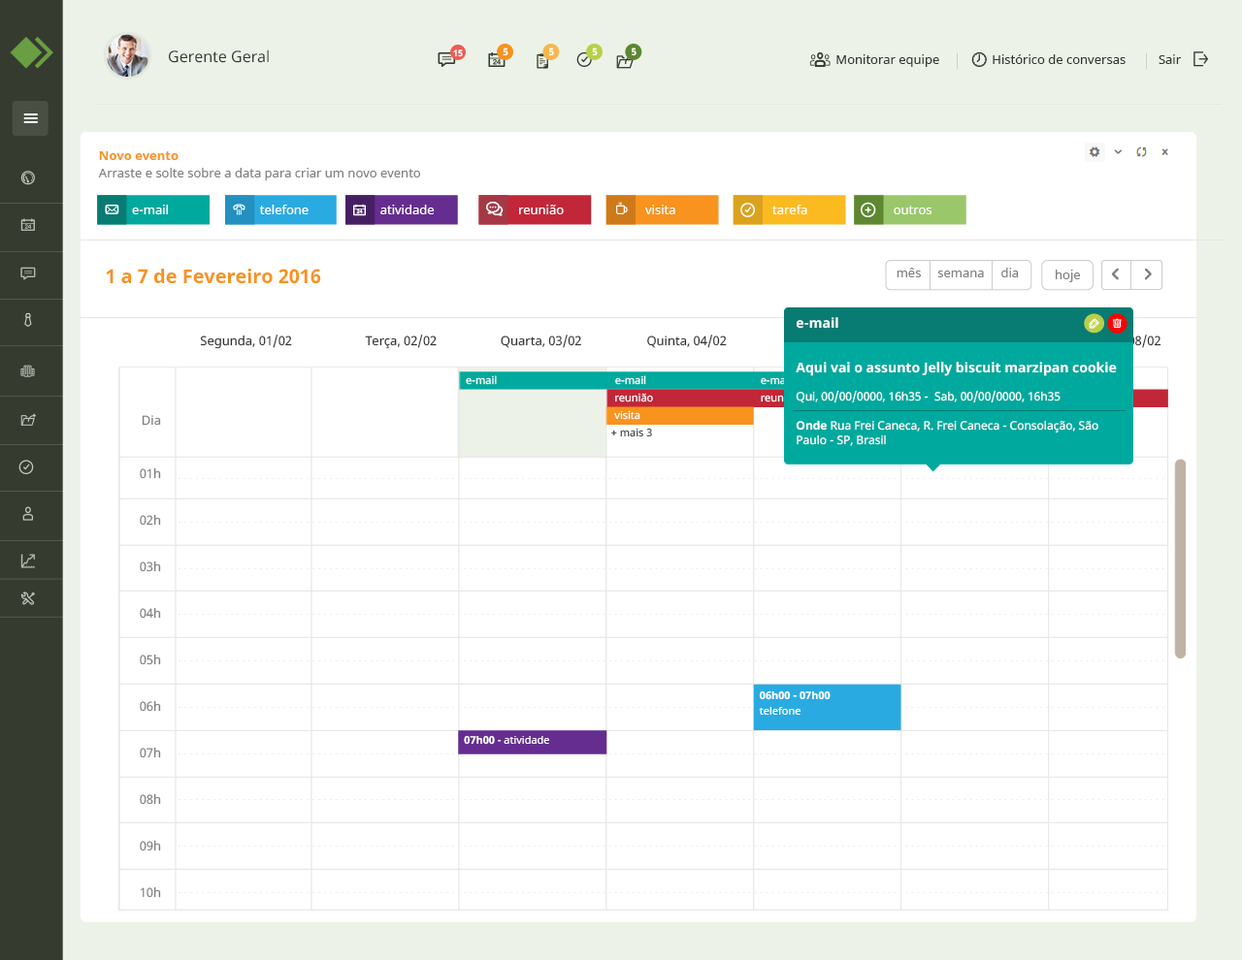
<style>
.page{position:relative;width:1242px;height:960px;background:#ffffff}
.page>*{position:absolute;margin:0}
.t1{font:15.5px "NotoSans";color:#353b2f}
.t2{font:8.7px "NotoSans-Bold";color:#ffffff}
.t3{font:9.7px "NotoSans-Bold";color:#ffffff}
.t4{font:12.6px "NotoSans";color:#353b2f}
.t5{font:12.6px "NotoSans-Bold";color:#f7931e}
.t6{font:12.6px "NotoSans";color:#808080}
.t7{font:12.6px "NotoSans";color:#ffffff}
.t8{font:19.4px "NotoSans-Bold";color:#f7931e}
.t9{font:11.6px/29.1px "NotoSans";color:#ffffff}
.t10{font:13.6px "NotoSans-Bold";color:#ffffff}
.t11{font:13.6px/29.1px "NotoSans-Bold";color:#ffffff}
.t12{font:11.6px "NotoSans";color:#ffffff}
.t13{font:11.6px/29.1px "NotoSans-Bold";color:#ffffff}
.t14{font:12.6px "NotoSans";color:#333333}
.t15{font:12.6px "NotoSans"}
.t16{font:10.7px "NotoSans";color:#ffffff}
.t17{font:10.7px "NotoSans";color:#00a99d}
.t18{font:12.6px/46.6px "NotoSans";color:#808080}
.t19{font:12.6px/53.4px "NotoSans";color:#808080}
.t20{font:10.7px "NotoSans"}
.t21{font:10.7px/15.5px "NotoSans-Bold";color:#ffffff}
.t22{font:10.7px/15.5px "NotoSans";color:#ffffff}
.t23{font:10.7px "NotoSans-Bold";color:#ffffff}
</style>
<div class="page">
<p class="t1" style="left:169px;top:49px;width:100px;height:14px">Gerente Geral</p>
<p class="t2" style="left:453px;top:49px;width:10px;height:8px">15</p>
<p class="t3" style="left:502px;top:48px;width:6px;height:8px">5</p>
<p class="t3" style="left:549px;top:48px;width:5px;height:8px">5</p>
<p class="t3" style="left:592px;top:48px;width:6px;height:8px">5</p>
<p class="t3" style="left:632px;top:48px;width:4px;height:8px">5</p>
<p class="t4" style="left:836px;top:54px;width:345px;height:13px">Monitorar equipe                Histórico de conversas          Sair</p>
<p class="t5" style="left:99px;top:151px;width:79px;height:9px">Novo evento</p>
<p class="t6" style="left:98px;top:168px;width:322px;height:12px">Arraste e solte sobre a data para criar um novo evento</p>
<p class="t7" style="left:132px;top:205px;width:36px;height:9px">e-mail</p>
<p class="t7" style="left:259px;top:205px;width:49px;height:9px">telefone</p>
<p class="t7" style="left:380px;top:205px;width:54px;height:9px">atividade</p>
<p class="t7" style="left:519px;top:205px;width:45px;height:9px">reunião</p>
<p class="t7" style="left:645px;top:205px;width:30px;height:9px">visita</p>
<p class="t7" style="left:772px;top:205px;width:35px;height:9px">tarefa</p>
<p class="t7" style="left:893px;top:206px;width:38px;height:8px">outros</p>
<p class="t8" style="left:106px;top:269px;width:215px;height:15px">1 a 7 de Fevereiro 2016</p>
<p class="t6" style="left:896px;top:268px;width:123px;height:9px">mês     semana     dia</p>
<p class="t6" style="left:1055px;top:270px;width:25px;height:12px">hoje</p>
<p class="t9" style="left:795px;top:317px;width:322px;height:129px"><span class="t10">e-mail<br><br></span><span class="t11">Aqui vai o assunto Jelly biscuit </span><span class="t10">marzipan cookie <br></span><span class="t12"><br>Qui, 00/00/0000, 16h35 -  Sab, 00/00/0000, 16h35<br></span><span class="t13">Onde</span> Rua Frei Caneca, R. Frei Caneca - Consolação, São <span class="t12">Paulo - SP, Brasil</span></p>
<p class="t14" style="left:200px;top:335px;width:92px;height:14px">Segunda, 01/02</p>
<p class="t14" style="left:365px;top:335px;width:72px;height:14px">Terça, 02/02</p>
<p class="t14" style="left:501px;top:335px;width:80px;height:13px">Quarta, 03/02</p>
<p class="t14" style="left:647px;top:335px;width:80px;height:13px">Quinta, 04/02</p>
<p class="t15" style="left:1067px;top:335px;width:94px;height:14px">Domingo, 08/02</p>
<p class="t16" style="left:466px;top:375px;width:31px;height:10px">e-mail</p>
<p class="t16" style="left:615px;top:375px;width:31px;height:10px">e-mail</p>
<p class="t17" style="left:761px;top:375px;width:30px;height:10px">e-mail</p>
<p class="t16" style="left:615px;top:393px;width:38px;height:10px">reunião</p>
<p class="t16" style="left:761px;top:393px;width:37px;height:10px">reunião</p>
<p class="t16" style="left:614px;top:410px;width:26px;height:10px">visita</p>
<p class="t18" style="left:140px;top:415px;width:21px;height:483px;text-align:right"><span class="t19">Dia<br>01h<br></span>02h<br>03h<br>04h<br>05h<br>06h<br>07h<br>08h<br>09h<br>10h</p>
<p class="t20" style="left:611px;top:428px;width:41px;height:9px">+ mais 3</p>
<p class="t21" style="left:759px;top:691px;width:71px;height:24px">06h00 - 07h00<br><span class="t22">telefone</span></p>
<p class="t16" style="left:464px;top:735px;width:85px;height:10px"><span class="t23">07h00</span> - atividade</p>
</div>
